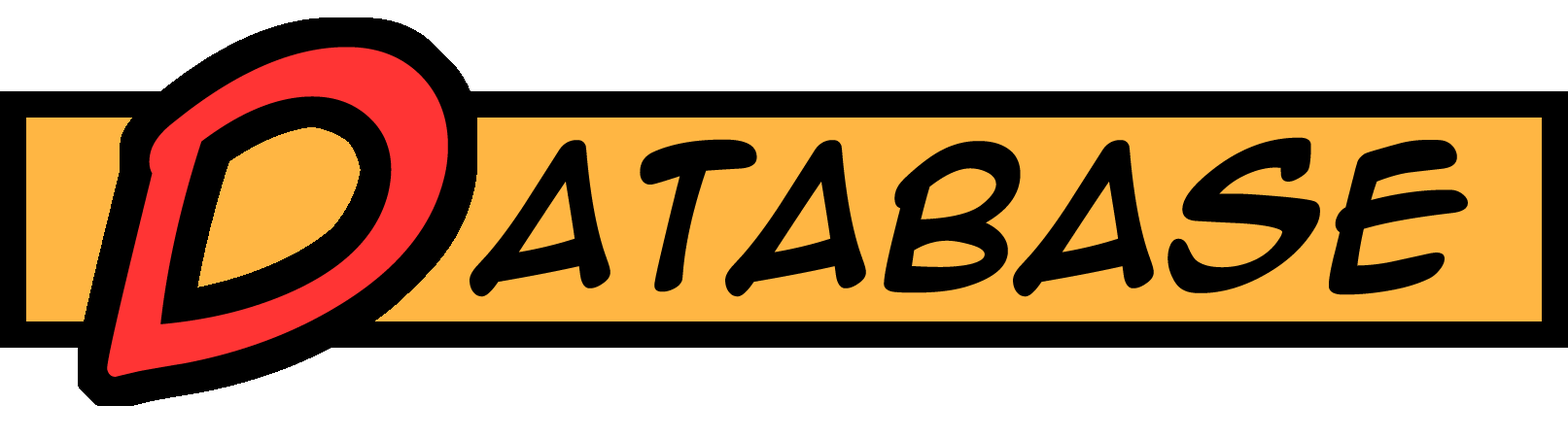
<style>
.page{position:relative;width:1568px;height:439px;background:#ffffff}
.page>*{position:absolute;margin:0}
.t1{font:162px "AnimeAce2.0BB-Bold";color:#000000}
</style>
<div class="page">
<p class="t1" style="left:470px;top:137px;width:998px;height:160px">atabase</p>
</div>
